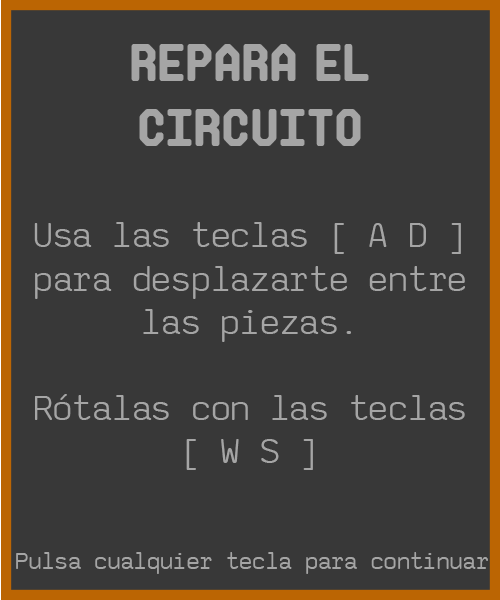
<style>
.page{position:relative;width:500px;height:600px;background:#383838}
.page>*{position:absolute;margin:0}
.t1{font:54px "Makisupa";color:#a5a5a5}
.t2{font:36px "saxMono";color:#a5a5a5}
.t3{font:24px "saxMono";color:#a5a5a5}
</style>
<div class="page">
<p class="t1" style="left:131px;top:44px;width:238px;height:102px;text-align:center">repara el<br>circuito</p>
<p class="t2" style="left:34px;top:222px;width:431px;height:248px;text-align:center">Usa las teclas [ A D ]<br>para desplazarte entre<br>las piezas.<br><br>Rótalas con las teclas<br>[ W S ]</p>
<p class="t3" style="left:16px;top:552px;width:472px;height:22px">Pulsa cualquier tecla para continuar</p>
</div>
